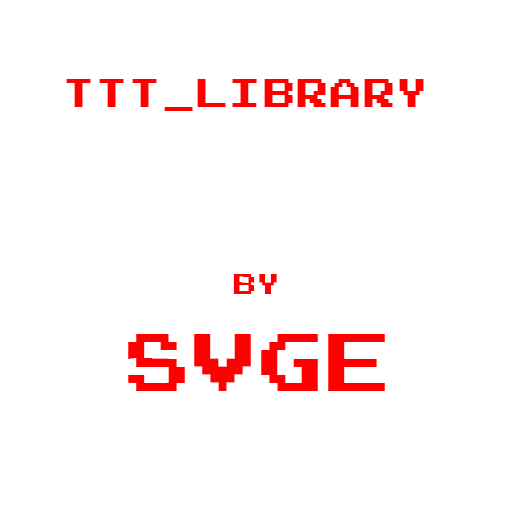
<style>
.page{position:relative;width:512px;height:512px;background:#ffffff}
.page>*{position:absolute;margin:0}
.t1{font:40.3px "JoystixMonospace-Regular";color:#ff0000}
.t2{font:80.6px "JoystixMonospace-Regular";color:#ff0000}
.t3{font:29px "JoystixMonospace-Regular";color:#ff0000}
</style>
<div class="page">
<p class="t1" style="left:66px;top:79px;width:358px;height:32px">ttt_library</p>
<p class="t2" style="left:128px;top:274px;width:257px;height:117px;text-align:center"><span class="t3">by<br></span>SVGE</p>
</div>
